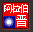
<style>
.page{position:relative;width:33px;height:32px;background:#f20000}
.page>*{position:absolute;margin:0}
.t1{font:10.4px "SimSun";letter-spacing:-0.25em;color:#ffffff}
.t2{font:11.7px "SimSun";color:#ffffff}
</style>
<div class="page">
<p class="t1" style="left:4px;top:4px;width:24px;height:9px">阿拉伯</p>
<p class="t2" style="left:16px;top:15px;width:11px;height:12px">晋</p>
</div>
